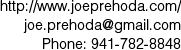
<style>
.page{position:relative;width:181px;height:50px;background:#ffffff}
.page>*{position:absolute;margin:0}
.t1{font:15px/19px "HelveticaLTStd-Light";color:#000000;scale:0.96 1}
</style>
<div class="page">
<p class="t1" style="left:0px;top:0px;width:182px;height:49px;text-align:right">http://www.joeprehoda.com/<br>joe.prehoda@gmail.com<br>Phone: 941-782-8848</p>
</div>
